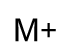
<style>
.page{position:relative;width:70px;height:55px;background:#ffffff}
.page>*{position:absolute;margin:0}
.t1{font:31.8px "DroidSans";color:#000000}
</style>
<div class="page">
<p class="t1" style="left:15px;top:18px;width:41px;height:24px">M+</p>
</div>
